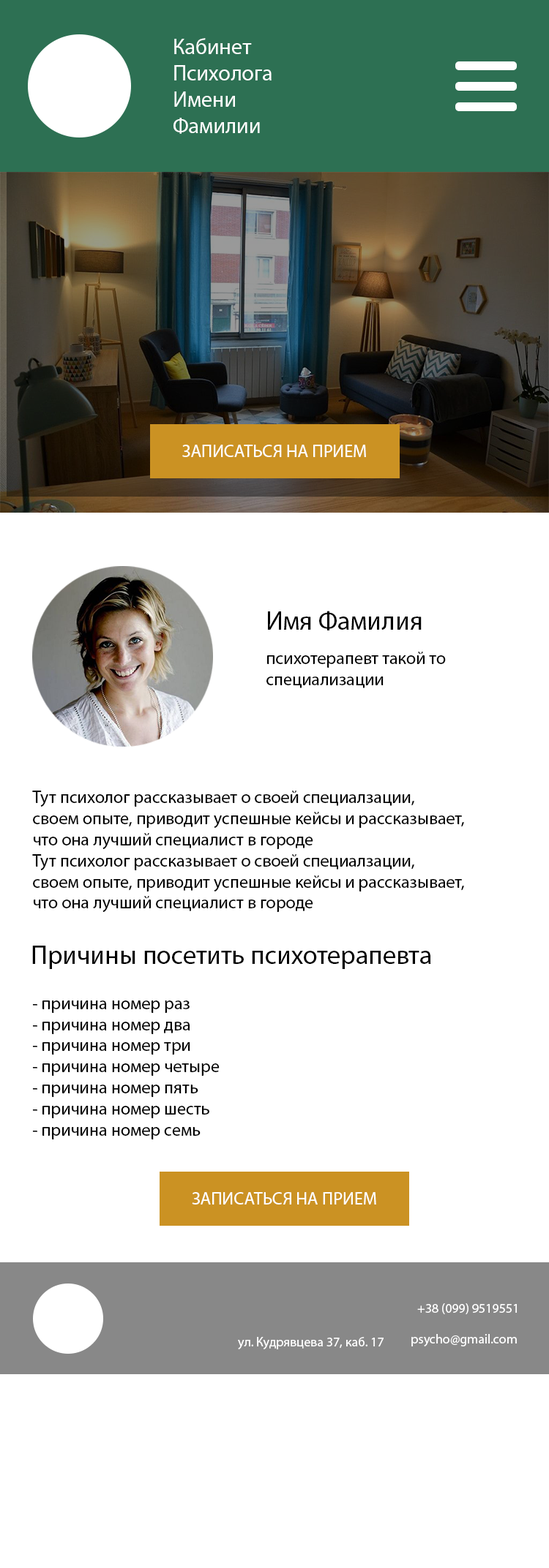
<style>
.page{position:relative;width:549px;height:1568px;background:#ffffff}
.page>*{position:absolute;margin:0}
.t1{font:21.9px "MyriadPro-Regular";color:#ffffff}
.t2{font:17.6px "MyriadPro-Regular";color:#ffffff}
.t3{font:26.3px "MyriadPro-Regular";color:#000000}
.t4{font:17.6px "MyriadPro-Regular";color:#000000}
.t5{font:13.2px "MyriadPro-Regular";color:#ffffff}
</style>
<div class="page">
<p class="t1" style="left:173px;top:38px;width:98px;height:96px">Кабинет<br>Психолога<br>Имени<br>Фамилии</p>
<p class="t2" style="left:182px;top:445px;width:184px;height:12px">ЗАПИСАТЬСЯ НА ПРИЕМ</p>
<p class="t3" style="left:268px;top:611px;width:153px;height:19px">Имя Фамилия</p>
<p class="t4" style="left:266px;top:652px;width:179px;height:36px">психотерапевт такой то<br>специализации</p>
<p class="t4" style="left:32px;top:791px;width:432px;height:121px">Тут психолог рассказывает о своей специалзации, <br>своем опыте, приводит успешные кейсы и рассказывает, <br>что она лучший специалист в городе<br>Тут психолог рассказывает о своей специалзации, <br>своем опыте, приводит успешные кейсы и рассказывает, <br>что она лучший специалист в городе</p>
<p class="t3" style="left:32px;top:946px;width:399px;height:23px">Причины посетить психотерапевта</p>
<p class="t4" style="left:32px;top:1000px;width:187px;height:139px">- причина номер раз<br>- причина номер два<br>- причина номер три<br>- причина номер четыре<br>- причина номер пять<br>- причина номер шесть<br>- причина номер семь</p>
<p class="t2" style="left:192px;top:1192px;width:184px;height:13px">ЗАПИСАТЬСЯ НА ПРИЕМ</p>
<p class="t5" style="left:417px;top:1303px;width:99px;height:11px">+38 (099) 9519551</p>
<p class="t5" style="left:238px;top:1337px;width:145px;height:12px">ул. Кудрявцева 37, каб. 17</p>
<p class="t5" style="left:411px;top:1334px;width:105px;height:12px">psycho@gmail.com</p>
</div>
